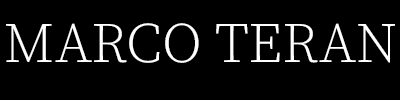
<style>
.page{position:relative;width:400px;height:100px;background:#000000}
.page>*{position:absolute;margin:0}
.t1{font:56.2px "SourceSerifRoman-Light";color:#ffffff}
</style>
<div class="page">
<p class="t1" style="left:6px;top:23px;width:389px;height:40px">MARCO TERAN</p>
</div>
